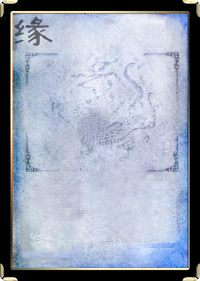
<style>
.page{position:relative;width:200px;height:281px}
.page>*{position:absolute;margin:0}
.t1{font:41.7px "FZGLJW--GB1-0";color:#595c65}
</style>
<div class="page">
<p class="t1" style="left:14px;top:16px;width:39px;height:30px">缘</p>
</div>
